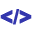
<style>
.page{position:relative;width:32px;height:32px;background:#ffffff}
.page>*{position:absolute;margin:0}
.t1{font:20px "Arial-Black";letter-spacing:-0.025em;color:#3336ad;font-weight:bold}
</style>
<div class="page">
<p class="t1" style="left:0px;top:9px;width:32px;height:16px">&lt;/&gt;</p>
</div>
